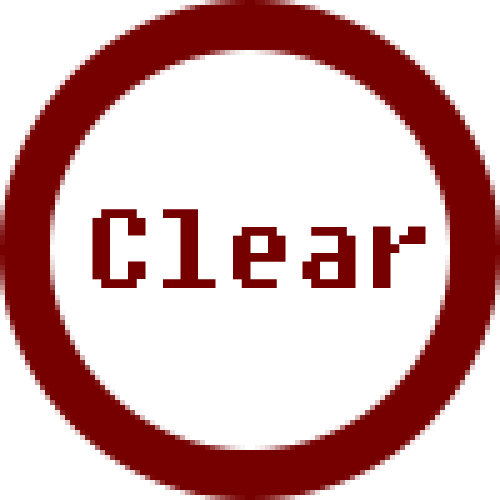
<style>
.page{position:relative;width:500px;height:500px;background:#ffffff}
.page>*{position:absolute;margin:0}
.t1{font:140.1px "DungGeunMo";color:#760000}
</style>
<div class="page">
<p class="t1" style="left:92px;top:209px;width:334px;height:79px">Clear</p>
</div>
